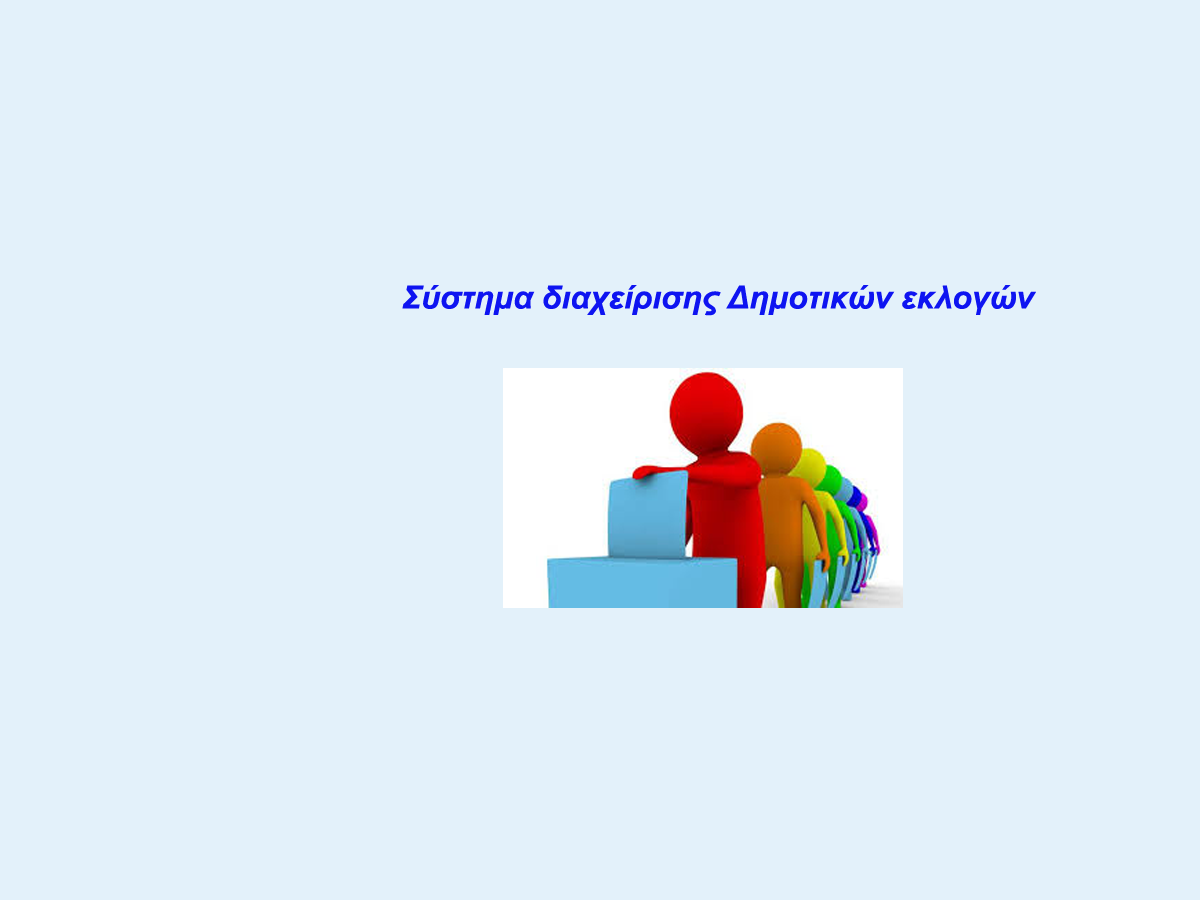
<style>
.page{position:relative;width:1200px;height:900px;background:#e3f1fa}
.page>*{position:absolute;margin:0}
.t1{font:32px "Arial-BoldItalicMT";color:#0e14f1}
</style>
<div class="page">
<p class="t1" style="left:402px;top:285px;width:634px;height:31px">Σύστημα διαχείρισης Δημοτικών εκλογών</p>
</div>
